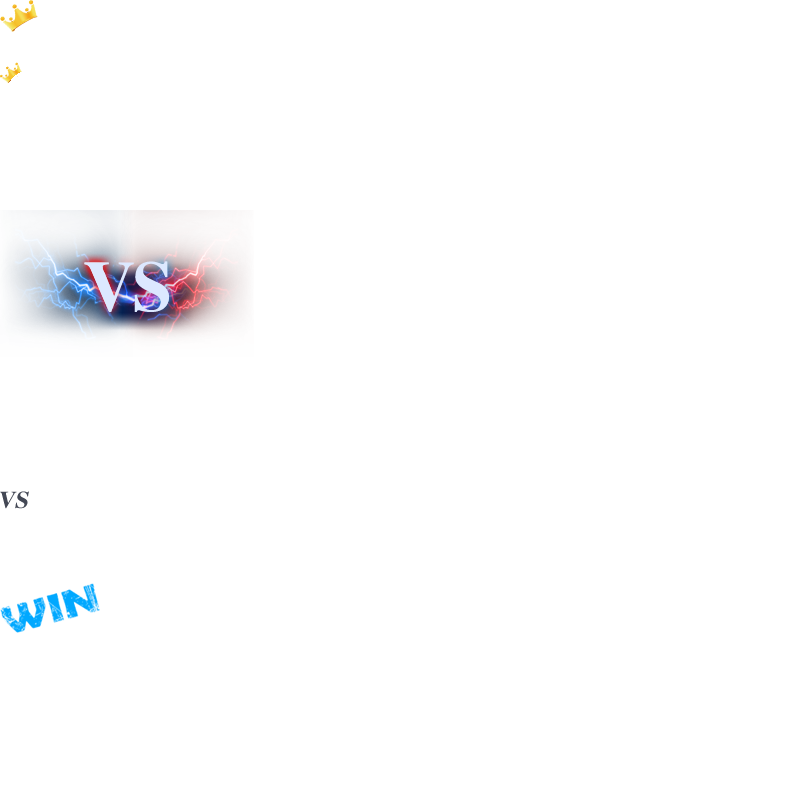
<style>
.page{position:relative;width:800px;height:800px;background:#ffffff}
.page>*{position:absolute;margin:0}
.t1{font:24px "Jxiaobiaosong";color:#434855;font-style:italic}
</style>
<div class="page">
<p class="t1" style="left:0px;top:491px;width:29px;height:18px">VS</p>
</div>
